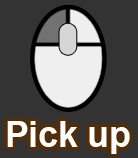
<style>
.page{position:relative;width:138px;height:158px;background:#333333}
.page>*{position:absolute;margin:0}
.t1{font:36px "Arial-BoldMT";letter-spacing:-0.01em;color:#ffffff}
</style>
<div class="page">
<p class="t1" style="left:7px;top:121px;width:123px;height:33px">Pick up</p>
</div>
